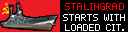
<style>
.page{position:relative;width:128px;height:32px;background:#000000}
.page>*{position:absolute;margin:0}
.t1{font:8.3px "pixelmix";color:#ff0000}
.t2{font:8.3px "pixelmix";color:#ffffff}
</style>
<div class="page">
<p class="t1" style="left:65px;top:3px;width:59px;height:7px">STALINGRAD</p>
<p class="t2" style="left:63px;top:14px;width:62px;height:17px;text-align:center">STARTS WITH<br>LOADED CIT.</p>
</div>
